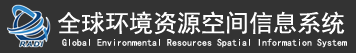
<style>
.page{position:relative;width:356px;height:53px;background:#333333}
.page>*{position:absolute;margin:0}
.t1{font:24px "SimHei";color:#ffffff}
.t2{font:10px "SimHei";color:#ffffff}
</style>
<div class="page">
<p class="t1" style="left:58px;top:11px;width:287px;height:24px">全球环境资源空间信息系统</p>
<p class="t2" style="left:62px;top:38px;width:285px;height:10px">Global Environmental Resources Spatial Information System</p>
</div>
